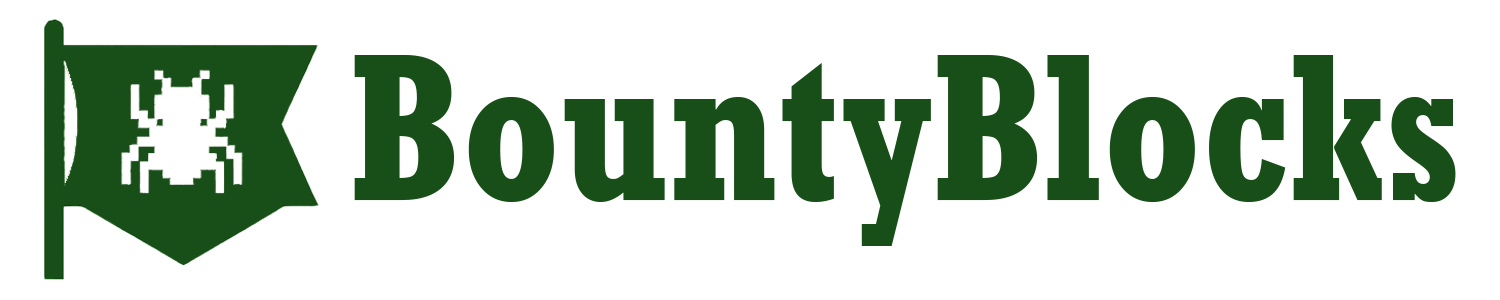
<style>
.page{position:relative;width:1500px;height:300px;background:#ffffff}
.page>*{position:absolute;margin:0}
.t1{font:206.5px "Rockwell-CondensedBold";color:#184f18}
</style>
<div class="page">
<p class="t1" style="left:354px;top:55px;width:1102px;height:191px">BountyBlocks</p>
</div>
